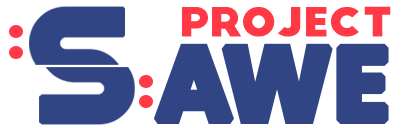
<style>
.page{position:relative;width:411px;height:128px;background:#ffffff}
.page>*{position:absolute;margin:0}
.t1{font:39.2px "BigJohn";color:#ff3946;font-weight:bold;scale:1.05 1}
.t2{font:102.8px "Poppins-Bold";color:#314584;font-weight:bold}
</style>
<div class="page">
<p class="t1" style="left:182px;top:6px;width:209px;height:31px">project</p>
<p class="t2" style="left:153px;top:43px;width:81px;height:81px">A</p>
<p class="t2" style="left:221px;top:43px;width:112px;height:81px">W</p>
<p class="t2" style="left:336px;top:43px;width:53px;height:81px">E</p>
</div>
